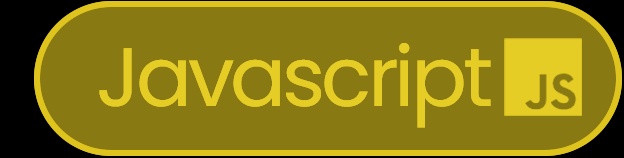
<style>
.page{position:relative;width:624px;height:158px;background:#897912}
.page>*{position:absolute;margin:0}
.t1{font:82.9px "Poppins-Regular";letter-spacing:-0.05em;color:#e6cd26}
</style>
<div class="page">
<p class="t1" style="left:99px;top:43px;width:392px;height:85px">Javascript</p>
</div>
